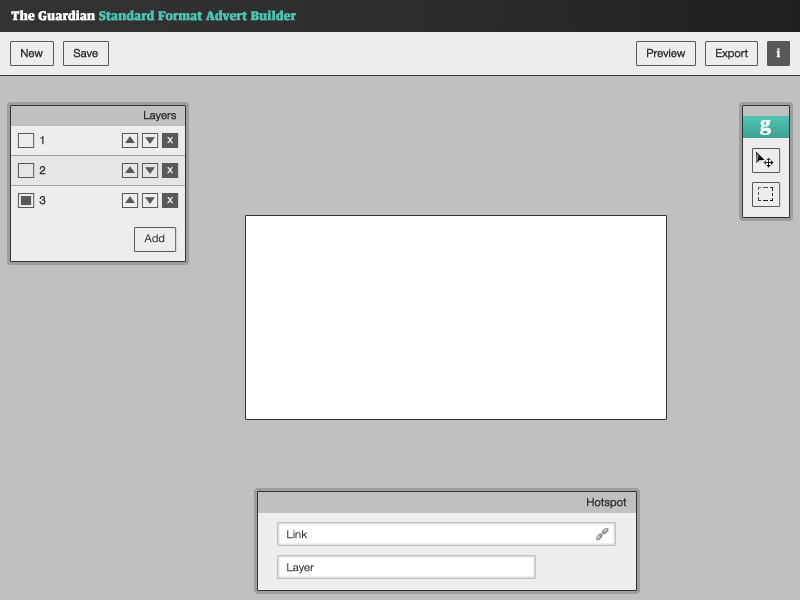
<style>
.page{position:relative;width:800px;height:600px;background:#c0c0c0}
.page>*{position:absolute;margin:0}
.t1{font:12px "GuardianTitlepiece-RegularAutohint";color:#4ec2b0;font-weight:bold}
.t2{font:12px "GuardianTitlepiece-RegularAutohint";color:#ffffff;font-weight:bold}
.t3{font:11px "HelveticaNeue-Light";color:#333333;font-weight:bold}
.t4{font:11px "GuardianTitlepiece-RegularAutohint";color:#ffffff;font-weight:bold}
.t5{font:18px "GuardianTitlepiece-RegularAutohint";color:#ffffff;font-weight:bold}
.t6{font:11px "HelveticaNeue-Light";color:#ededed;font-weight:bold}
</style>
<div class="page">
<p class="t1" style="left:11px;top:10px;width:285px;height:11px"><span class="t2">The Guardian </span>Standard Format Advert Builder</p>
<p class="t3" style="left:21px;top:48px;width:22px;height:10px">New</p>
<p class="t3" style="left:73px;top:48px;width:25px;height:10px">Save</p>
<p class="t3" style="left:647px;top:48px;width:39px;height:10px">Preview</p>
<p class="t3" style="left:716px;top:48px;width:32px;height:12px">Export</p>
<p class="t4" style="left:776px;top:48px;width:5px;height:10px">i</p>
<p class="t3" style="left:144px;top:110px;width:32px;height:12px">Layers</p>
<p class="t5" style="left:759px;top:119px;width:12px;height:16px;opacity:0.9">g</p>
<p class="t3" style="left:40px;top:136px;width:4px;height:9px">1</p>
<p class="t6" style="left:167px;top:137px;width:6px;height:7px">x</p>
<p class="t3" style="left:39px;top:166px;width:7px;height:9px">2</p>
<p class="t6" style="left:167px;top:167px;width:6px;height:7px">x</p>
<p class="t3" style="left:39px;top:196px;width:7px;height:9px">3</p>
<p class="t6" style="left:167px;top:197px;width:6px;height:7px">x</p>
<p class="t3" style="left:144px;top:234px;width:21px;height:9px">Add</p>
<p class="t3" style="left:587px;top:497px;width:40px;height:12px">Hotspot</p>
<p class="t3" style="left:287px;top:530px;width:21px;height:9px">Link</p>
<p class="t3" style="left:287px;top:563px;width:27px;height:11px">Layer</p>
</div>
